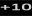
<style>
.page{position:relative;width:32px;height:16px;background:#000000}
.page>*{position:absolute;margin:0}
.t1{font:10px "Calibri";color:#d4d4d4;text-transform:uppercase;font-weight:bold;scale:2 1}
</style>
<div class="page">
<p class="t1" style="left:0px;top:3px;width:32px;height:8px">+10</p>
</div>
